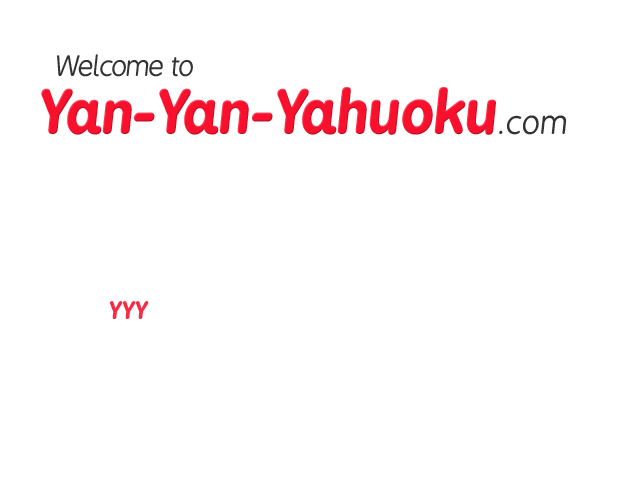
<style>
.page{position:relative;width:640px;height:480px;background:#ffffff}
.page>*{position:absolute;margin:0}
.t1{font:28.1px "BPreplay-Italic";letter-spacing:-0.04em;color:#333333}
.t2{font:58.3px "BPreplay-BoldItalic";color:#f9102d}
.t3{font:32.4px "BPreplay-Italic";color:#f9102d}
.t4{font:23px "BPreplay-BoldItalic";color:#f82b44}
</style>
<div class="page">
<p class="t1" style="left:57px;top:54px;width:136px;height:23px">Welcome to</p>
<p class="t2" style="left:41px;top:86px;width:526px;height:49px">Yan-Yan-Yahuoku<span class="t3">.com</span></p>
<p class="t2" style="left:41px;top:86px;width:455px;height:49px">Yan-Yan-Yahuoku</p>
<p class="t4" style="left:110px;top:301px;width:39px;height:18px">YYY</p>
</div>
